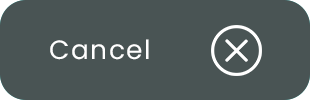
<style>
.page{position:relative;width:310px;height:100px;background:#495454}
.page>*{position:absolute;margin:0}
.t1{font:26.5px "Poppins-Regular";letter-spacing:0.06em;color:#ffffff}
</style>
<div class="page">
<p class="t1" style="left:50px;top:39px;width:99px;height:21px">Cancel</p>
</div>
